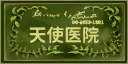
<style>
.page{position:relative;width:128px;height:64px}
.page>*{position:absolute;margin:0}
.t1{font:17.8px "JiangChengYuanTi-600W";color:#dbdb80}
</style>
<div class="page">
<p class="t1" style="left:29px;top:26px;width:70px;height:17px">天使医院</p>
</div>
